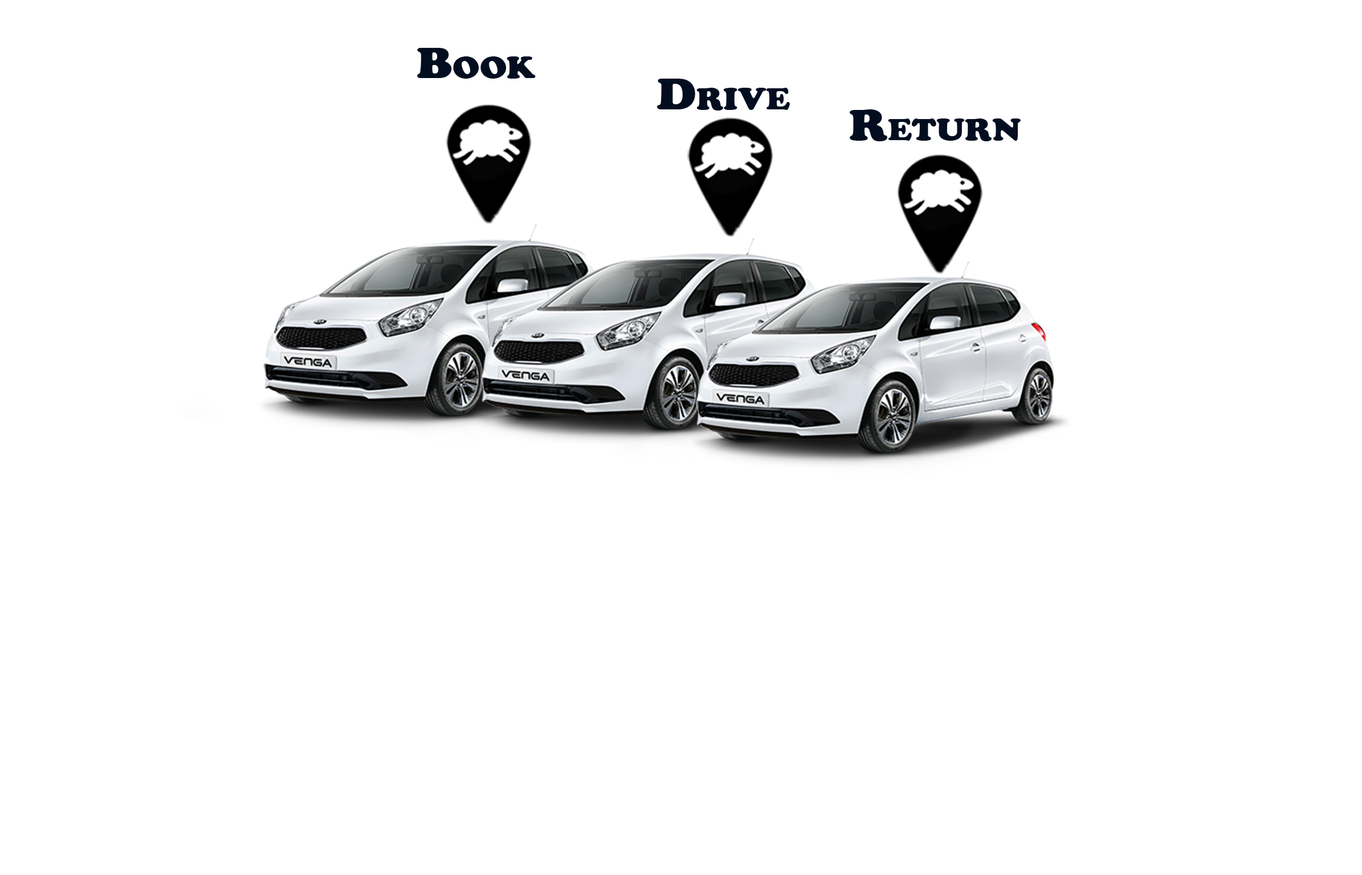
<style>
.page{position:relative;width:1362px;height:875px;background:#ffffff}
.page>*{position:absolute;margin:0}
.t1{font:45.3px "CooperBlack";color:#020e20;font-variant:small-caps;scale:1.1 1}
</style>
<div class="page">
<p class="t1" style="left:417px;top:48px;width:119px;height:31px">Book</p>
<p class="t1" style="left:657px;top:79px;width:133px;height:32px">Drive</p>
<p class="t1" style="left:850px;top:109px;width:171px;height:32px">Return</p>
</div>
